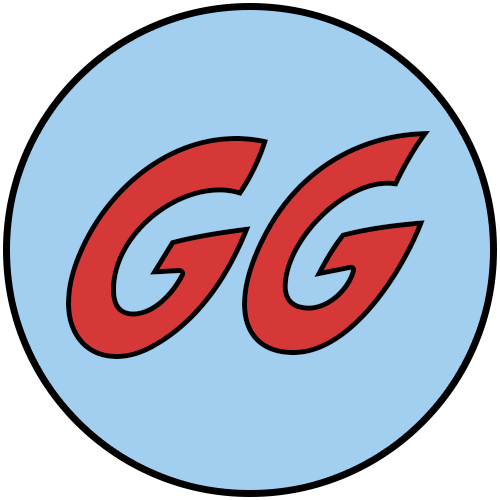
<style>
.page{position:relative;width:500px;height:500px;background:#a2cff0}
.page>*{position:absolute;margin:0}
.t1{font:270px "CCBiffBamBoom";color:#d63838}
</style>
<div class="page">
<p class="t1" style="left:66px;top:131px;width:364px;height:228px">GG</p>
</div>
